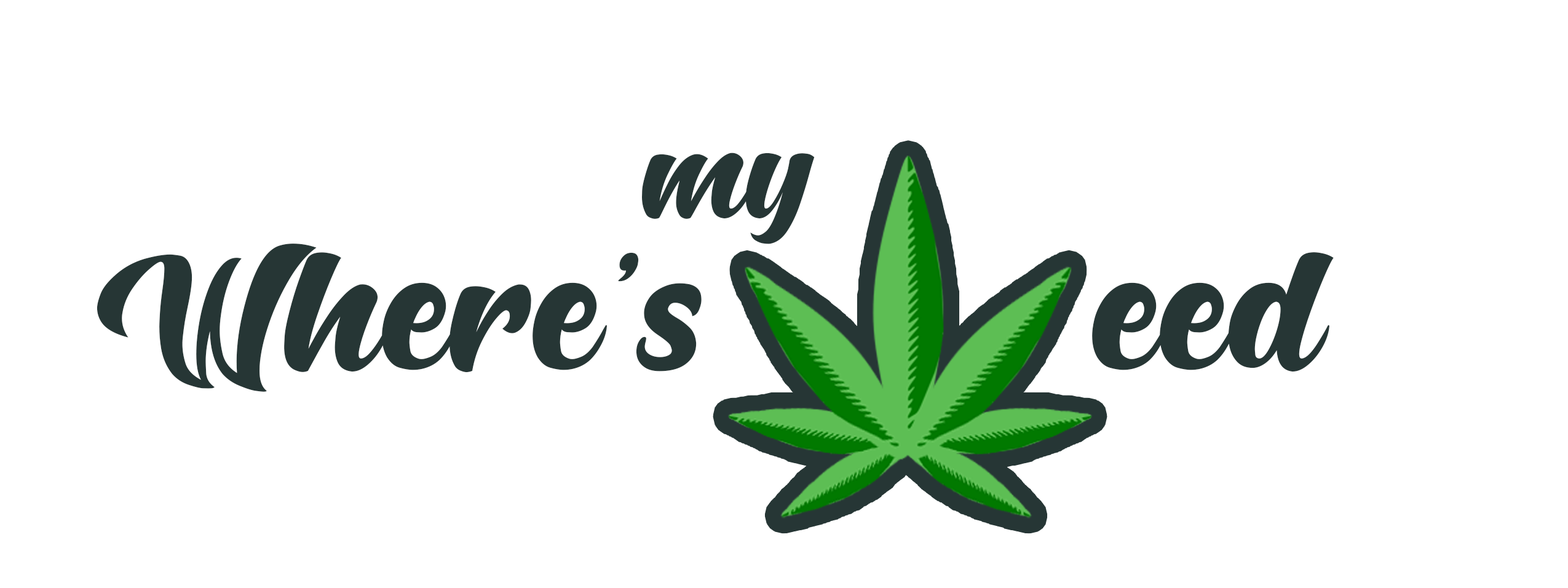
<style>
.page{position:relative;width:1568px;height:588px;background:#ffffff}
.page>*{position:absolute;margin:0}
.t1{font:192.2px "Hunters";color:#263635}
.t2{font:256.2px "Hunters";color:#263635}
</style>
<div class="page">
<p class="t1" style="left:642px;top:152px;width:173px;height:92px">my</p>
<p class="t2" style="left:97px;top:244px;width:605px;height:148px">Where’s</p>
<p class="t2" style="left:1092px;top:252px;width:242px;height:119px">eed</p>
</div>
